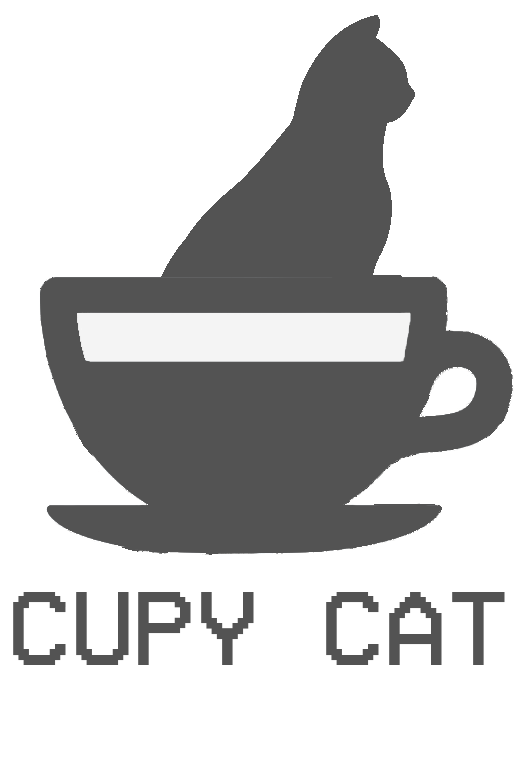
<style>
.page{position:relative;width:516px;height:762px;background:#ffffff}
.page>*{position:absolute;margin:0}
.t1{font:107px "VCROSDMono";color:#535353}
</style>
<div class="page">
<p class="t1" style="left:13px;top:592px;width:492px;height:73px">CUPY CAT</p>
</div>
